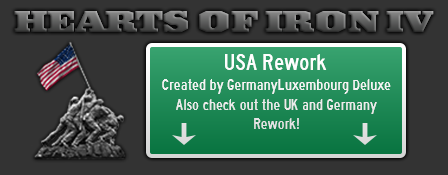
<style>
.page{position:relative;width:448px;height:175px;background:#333333}
.page>*{position:absolute;margin:0}
.t1{font:32px "IronmongerBlack"}
.t2{font:24px "HighwayGothicNarrow";color:#ffffff}
.t3{font:16px "HighwayGothicNarrow";color:#ffffff}
</style>
<div class="page">
<p class="t1" style="left:14px;top:10px;width:420px;height:23px">HEARTS OF IRON IV</p>
<p class="t2" style="left:225px;top:54px;width:102px;height:16px">USA Rework</p>
<p class="t3" style="left:162px;top:79px;width:229px;height:50px;text-align:center">Created by GermanyLuxembourg Deluxe<br>Also check out the UK and Germany Rework!</p>
</div>
